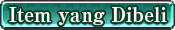
<style>
.page{position:relative;width:175px;height:30px}
.page>*{position:absolute;margin:0}
.t1{font:20px "RyuminPro-ExBold";color:#fff6f3}
</style>
<div class="page">
<p class="t1" style="left:9px;top:7px;width:158px;height:18px">Item yang Dibeli</p>
</div>
